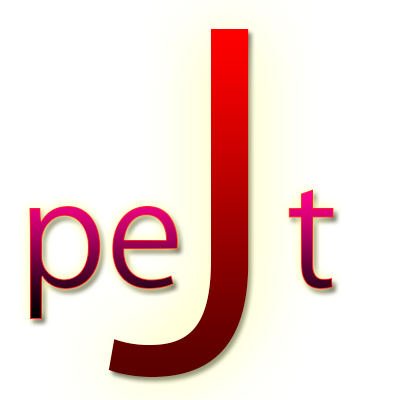
<style>
.page{position:relative;width:400px;height:400px;background:#ffffff}
.page>*{position:absolute;margin:0}
.t1{font:450px "KozGoPr6N-Regular"}
.t2{font:145px "KozGoPr6N-Regular"}
</style>
<div class="page">
<p class="t1" style="left:108px;top:29px;width:141px;height:348px">J</p>
<p class="t2" style="left:29px;top:189px;width:305px;height:130px">pe   t</p>
</div>
